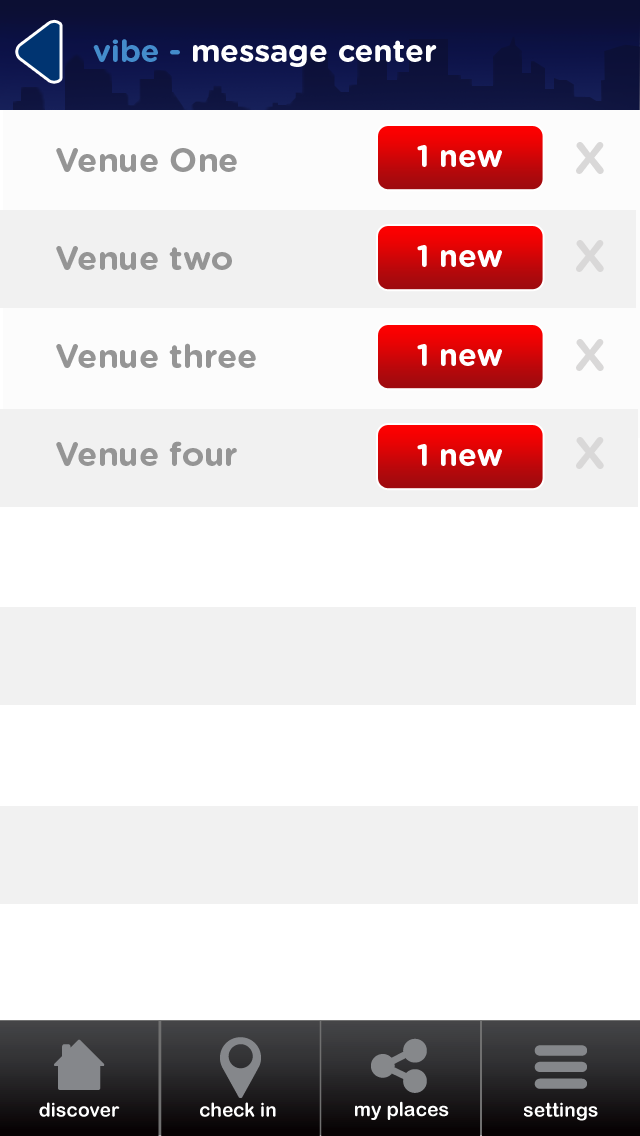
<style>
.page{position:relative;width:640px;height:1136px;background:#f1f1f1}
.page>*{position:absolute;margin:0}
.t1{font:30.9px "GothamRounded-Bold";color:#ffffff}
.t2{font:30.9px "GothamRounded-Bold";color:#448ccb}
.t3{font:33.2px "GothamRounded-Bold";color:#959595}
.t4{font:44.8px "GothamRounded-Bold";color:#d9d8d8}
</style>
<div class="page">
<p class="t1" style="left:93px;top:39px;width:344px;height:28px"><span class="t2">vibe - </span>message center</p>
<p class="t3" style="left:56px;top:148px;width:181px;height:24px">Venue One</p>
<p class="t1" style="left:417px;top:145px;width:85px;height:22px">1 new</p>
<p class="t4" style="left:576px;top:142px;width:28px;height:32px">X</p>
<p class="t3" style="left:56px;top:246px;width:176px;height:24px">Venue two</p>
<p class="t1" style="left:417px;top:245px;width:85px;height:22px">1 new</p>
<p class="t4" style="left:576px;top:240px;width:28px;height:32px">X</p>
<p class="t4" style="left:576px;top:339px;width:28px;height:32px">X</p>
<p class="t3" style="left:56px;top:343px;width:200px;height:25px">Venue three</p>
<p class="t1" style="left:417px;top:344px;width:85px;height:22px">1 new</p>
<p class="t4" style="left:576px;top:437px;width:28px;height:32px">X</p>
<p class="t3" style="left:56px;top:441px;width:181px;height:25px">Venue four</p>
<p class="t1" style="left:417px;top:444px;width:85px;height:22px">1 new</p>
</div>
